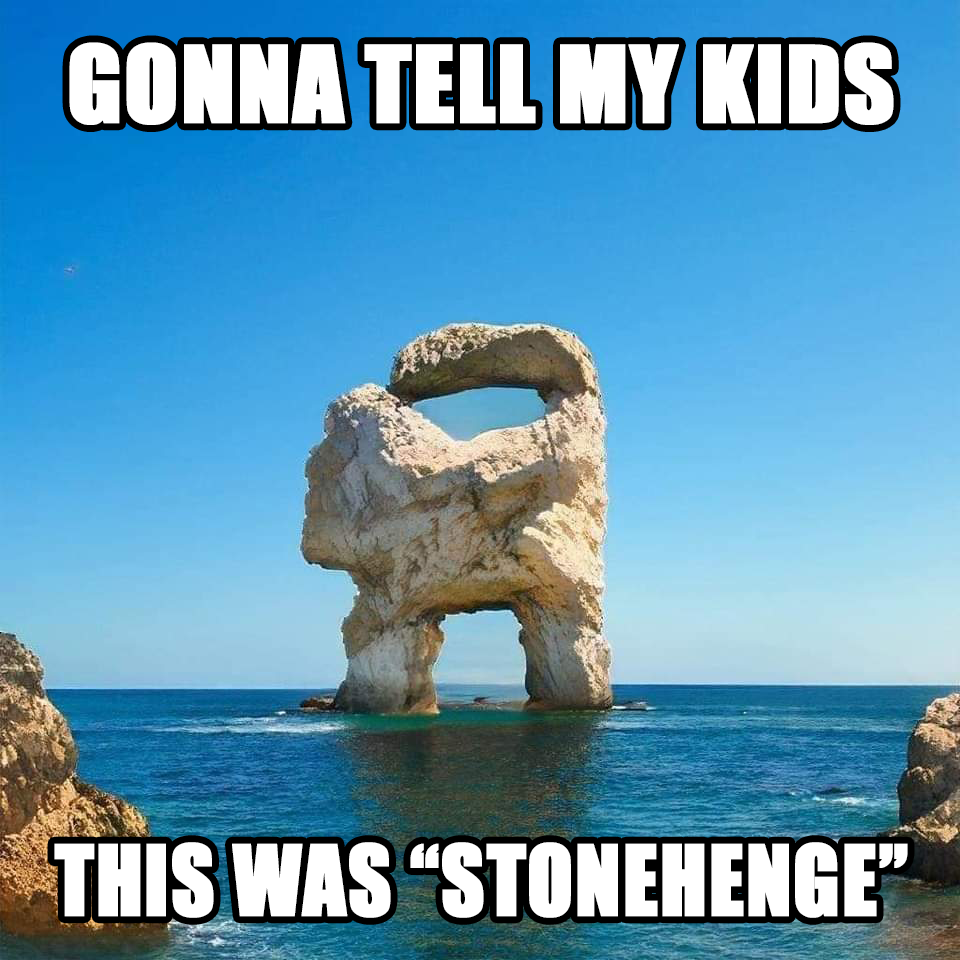
<style>
.page{position:relative;width:960px;height:960px}
.page>*{position:absolute;margin:0}
.t1{font:98.5px "Impact";color:#ffffff;font-weight:bold}
.t2{font:89.9px "Impact";color:#ffffff;font-weight:bold;scale:0.93 1}
</style>
<div class="page">
<p class="t1" style="left:69px;top:42px;width:825px;height:83px">GONNA TELL MY KIDS</p>
<p class="t2" style="left:54px;top:842px;width:854px;height:76px">THIS WAS “STONEHENGE”</p>
</div>
